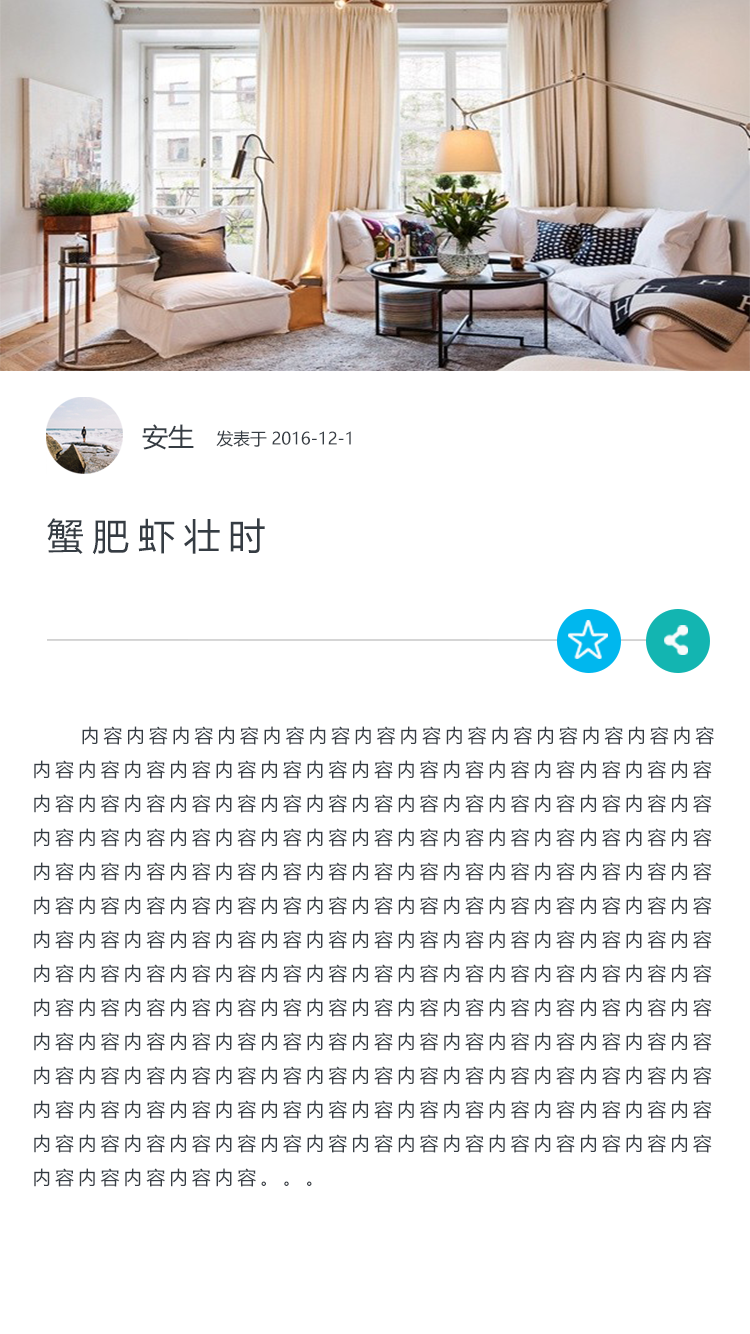
<style>
.page{position:relative;width:750px;height:1334px;background:#ffffff}
.page>*{position:absolute;margin:0}
.t1{font:26px "MicrosoftYaHei";color:#353c43}
.t2{font:16.7px "MicrosoftYaHei";color:#353c43}
.t3{font:36.7px "MicrosoftYaHei";letter-spacing:0.24em;color:#353c43}
.t4{font:18.7px/34px "MicrosoftYaHei";letter-spacing:0.22em;color:#353c43}
</style>
<div class="page">
<p class="t1" style="left:142px;top:424px;width:52px;height:26px">安生</p>
<p class="t2" style="left:216px;top:430px;width:135px;height:17px">发表于 2016-12-1</p>
<p class="t3" style="left:47px;top:518px;width:218px;height:37px">蟹肥虾壮时</p>
<p class="t4" style="left:34px;top:726px;width:680px;height:461px">内容内容内容内容内容内容内容内容内容内容内容内容内容内容<br>内容内容内容内容内容内容内容内容内容内容内容内容内容内容内容<br>内容内容内容内容内容内容内容内容内容内容内容内容内容内容内容<br>内容内容内容内容内容内容内容内容内容内容内容内容内容内容内容<br>内容内容内容内容内容内容内容内容内容内容内容内容内容内容内容<br>内容内容内容内容内容内容内容内容内容内容内容内容内容内容内容<br>内容内容内容内容内容内容内容内容内容内容内容内容内容内容内容<br>内容内容内容内容内容内容内容内容内容内容内容内容内容内容内容<br>内容内容内容内容内容内容内容内容内容内容内容内容内容内容内容<br>内容内容内容内容内容内容内容内容内容内容内容内容内容内容内容<br>内容内容内容内容内容内容内容内容内容内容内容内容内容内容内容<br>内容内容内容内容内容内容内容内容内容内容内容内容内容内容内容<br>内容内容内容内容内容内容内容内容内容内容内容内容内容内容内容<br>内容内容内容内容内容。。。</p>
</div>
